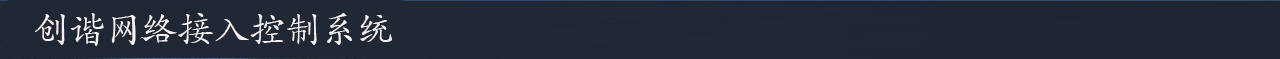
<style>
.page{position:relative;width:1280px;height:59px;background:#1f2734}
.page>*{position:absolute;margin:0}
.t1{font:36px "SIL-Kai-Reg-Jian";color:#f7f1f1}
</style>
<div class="page">
<p class="t1" style="left:34px;top:13px;width:358px;height:33px">创谐网络接入控制系统</p>
</div>
